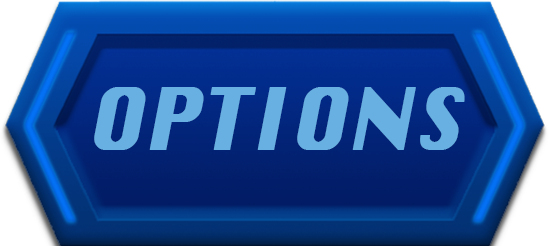
<style>
.page{position:relative;width:549px;height:246px}
.page>*{position:absolute;margin:0}
.t1{font:82.9px "Silom";color:#67b0e1;font-weight:bold;font-style:italic}
</style>
<div class="page">
<p class="t1" style="left:94px;top:87px;width:371px;height:63px">OPTIONS</p>
</div>
